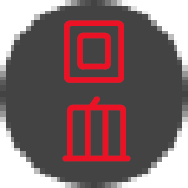
<style>
.page{position:relative;width:188px;height:188px;background:#434343}
.page>*{position:absolute;margin:0}
.t1{font:71.1px "YouYuan";letter-spacing:-0.04em;color:#ec1226;font-weight:bold}
</style>
<div class="page">
<p class="t1" style="left:64px;top:20px;width:60px;height:63px">回</p>
<p class="t1" style="left:62px;top:96px;width:69px;height:66px">血</p>
</div>
